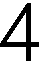
<style>
.page{position:relative;width:40px;height:64px;background:#ffffff}
.page>*{position:absolute;margin:0}
.t1{font:74px "OPPOSans-R";color:#000000}
</style>
<div class="page">
<p class="t1" style="left:0px;top:3px;width:39px;height:58px">4</p>
</div>
